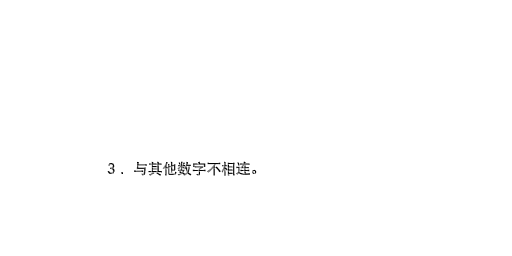
<style>
.page{position:relative;width:512px;height:256px;background:#ffffff}
.page>*{position:absolute;margin:0}
.t1{font:14.7px "DFPHeiW5-GB"}
</style>
<div class="page">
<p class="t1" style="left:107px;top:161px;width:150px;height:15px">３．与其他数字不相连。</p>
</div>
